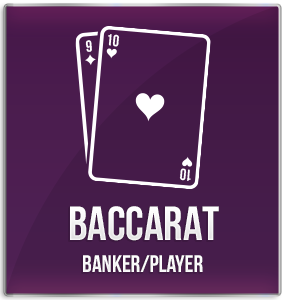
<style>
.page{position:relative;width:285px;height:300px}
.page>*{position:absolute;margin:0}
.t1{font:48px "BebasNeueBold";color:#ffffff;text-transform:uppercase}
.t2{font:24px "BebasNeueBold";color:#ffffff}
</style>
<div class="page">
<p class="t1" style="left:70px;top:206px;width:149px;height:35px">baccarat</p>
<p class="t2" style="left:83px;top:255px;width:120px;height:17px">banker/player</p>
</div>
